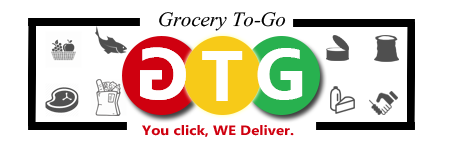
<style>
.page{position:relative;width:450px;height:150px;background:#ffffff}
.page>*{position:absolute;margin:0}
.t1{font:31px "AngsanaNew-Italic";color:#000000}
.t2{font:72.1px "Ebrima-Bold";color:#ffffff}
.t3{font:13.4px "Ebrima-Bold";color:#cf000f;scale:1.12 1}
</style>
<div class="page">
<p class="t1" style="left:159px;top:12px;width:127px;height:19px">Grocery To-Go</p>
<p class="t2" style="left:140px;top:47px;width:46px;height:53px;rotate:180deg">G</p>
<p class="t2" style="left:140px;top:47px;width:46px;height:53px;rotate:180deg">G</p>
<p class="t2" style="left:202px;top:51px;width:41px;height:50px">T</p>
<p class="t2" style="left:257px;top:48px;width:46px;height:52px">G</p>
<p class="t3" style="left:142px;top:125px;width:152px;height:12px">.You click, WE Deliver</p>
</div>
